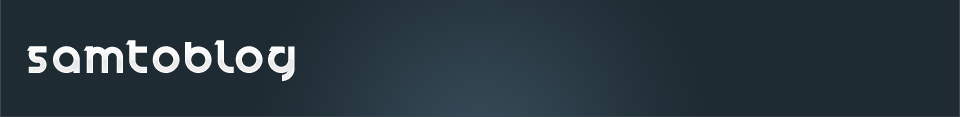
<style>
.page{position:relative;width:960px;height:117px;background:#1e2b33}
.page>*{position:absolute;margin:0}
.t1{font:38px "Velocity";letter-spacing:0.15em;color:#fffefe}
</style>
<div class="page">
<p class="t1" style="left:27px;top:40px;width:268px;height:41px">SAMTOBLOG</p>
</div>
